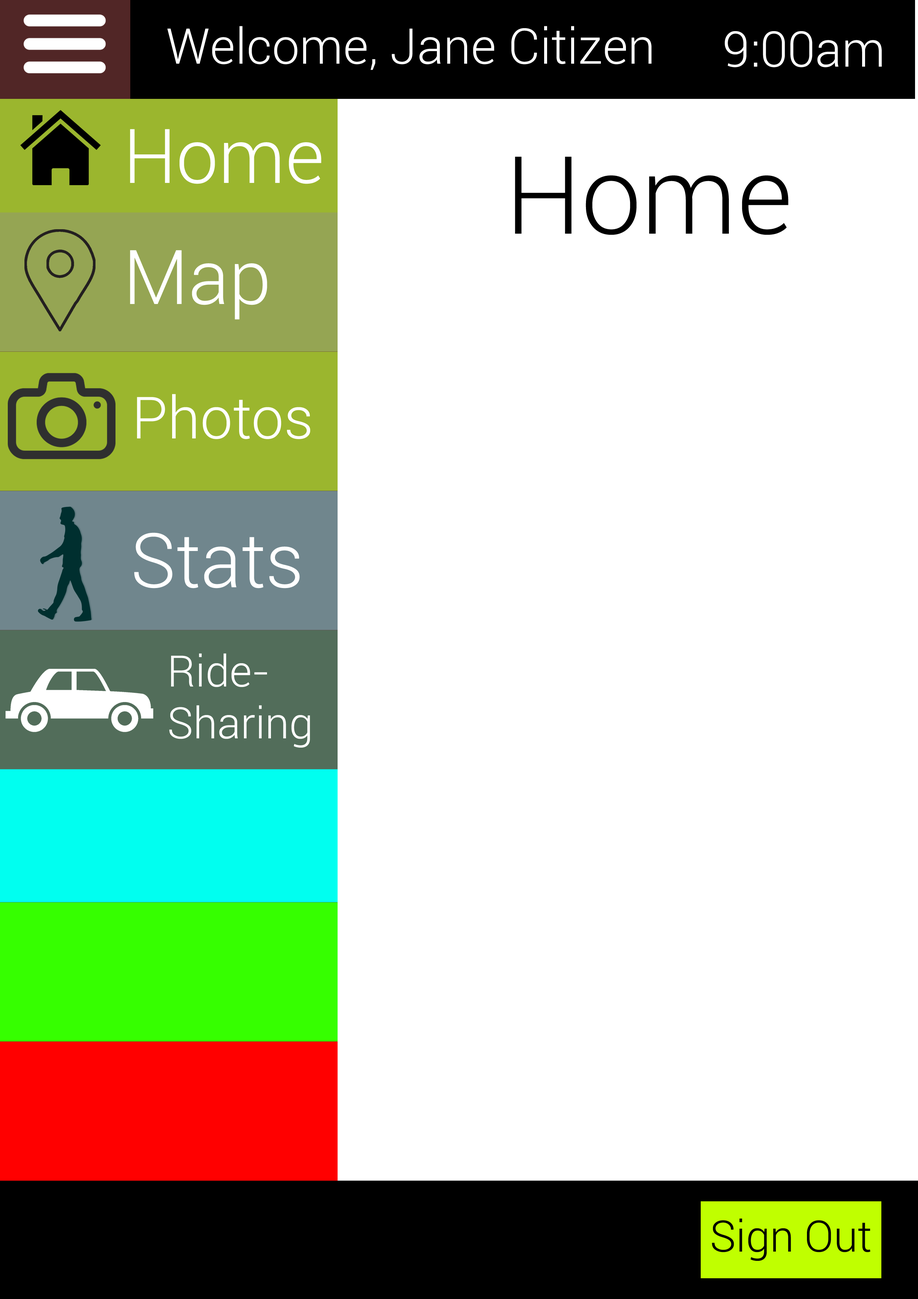
<style>
.page{position:relative;width:918px;height:1299px;background:#ffffff}
.page>*{position:absolute;margin:0}
.t1{font:49.4px "Roboto-Light";color:#ffffff}
.t2{font:75.6px "Roboto-Light";color:#ffffff}
.t3{font:108px "Roboto-Light";color:#000000}
.t4{font:58.3px "Roboto-Light";color:#ffffff}
.t5{font:43.2px "Roboto-Light";color:#ffffff}
</style>
<div class="page">
<p class="t1" style="left:167px;top:26px;width:485px;height:44px">Welcome, Jane Citizen</p>
<p class="t1" style="left:725px;top:31px;width:157px;height:36px">9:00am</p>
<p class="t2" style="left:130px;top:129px;width:191px;height:55px">Home</p>
<p class="t3" style="left:515px;top:157px;width:274px;height:78px">Home</p>
<p class="t2" style="left:130px;top:250px;width:137px;height:70px">Map</p>
<p class="t4" style="left:137px;top:394px;width:173px;height:45px">Photos</p>
<p class="t2" style="left:134px;top:532px;width:166px;height:56px">Stats</p>
<p class="t5" style="left:169px;top:653px;width:141px;height:94px">Ride-<br>Sharing</p>
</div>
